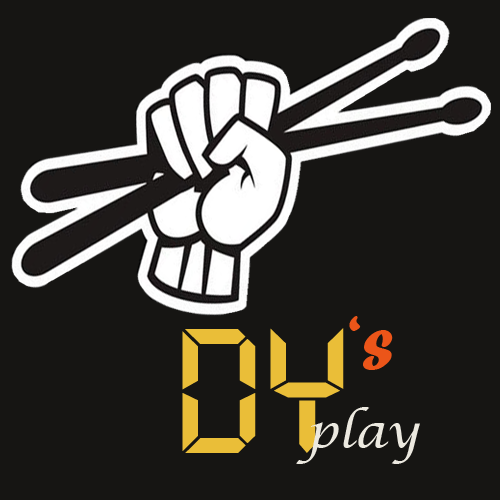
<style>
.page{position:relative;width:500px;height:500px;background:#161513}
.page>*{position:absolute;margin:0}
.t1{font:72px "ForteMT";color:#ec5519}
.t2{font:171.8px "DigifaceWide";color:#eabe38;scale:0.69 1}
.t3{font:48px "LucidaCalligraphy-Italic";color:#ece9e0}
</style>
<div class="page">
<p class="t1" style="left:349px;top:316px;width:44px;height:54px">‘s</p>
<p class="t2" style="left:182px;top:328px;width:162px;height:125px">DY</p>
<p class="t3" style="left:296px;top:407px;width:124px;height:57px">play</p>
</div>
